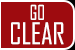
<style>
.page{position:relative;width:75px;height:50px;background:#9e0b0f}
.page>*{position:absolute;margin:0}
.t1{font:19.6px "AgencyFB-Reg";color:#ffffff;scale:0.89 1}
.t2{font:28.4px "AgencyFB-Reg";color:#ffffff}
</style>
<div class="page">
<p class="t1" style="left:30px;top:4px;width:14px;height:16px">GO</p>
<p class="t2" style="left:11px;top:22px;width:53px;height:23px">CLEAR</p>
</div>
